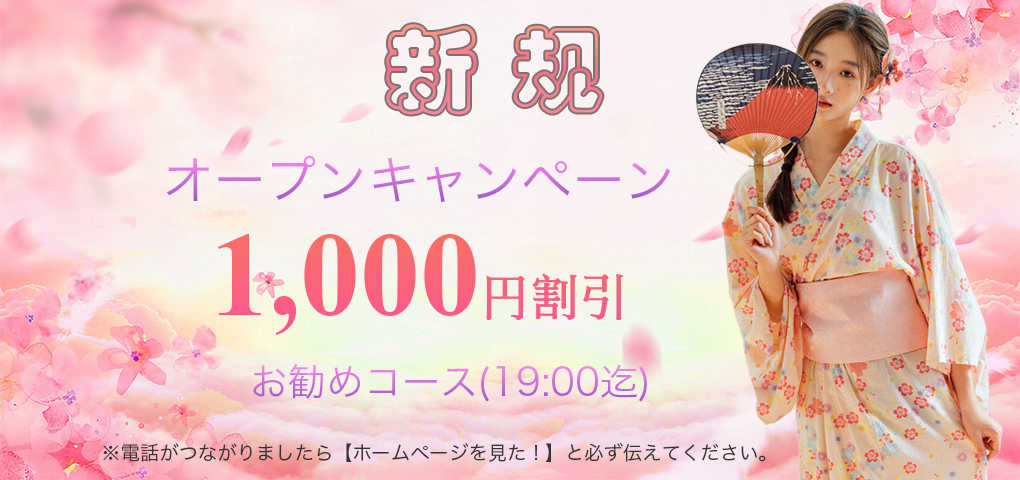
<style>
.page{position:relative;width:1020px;height:480px}
.page>*{position:absolute;margin:0}
.t1{font:94.2px "GJJCYJW--GB1-0";color:#f7808b}
.t2{font:51.2px "HiraKakuPro-W3"}
.t3{font:120px "TimesNewRomanPS-BoldMT";color:#fa637b}
.t4{font:50px "SimSong-Bold";color:#fa637b}
.t5{font:37.9px "HiraKakuPro-W3"}
.t6{font:19.3px "HiraKakuPro-W3";color:#343434}
</style>
<div class="page">
<p class="t1" style="left:386px;top:24px;width:217px;height:91px">新 规規</p>
<p class="t2" style="left:166px;top:155px;width:505px;height:47px">オープンキャンペーン</p>
<p class="t3" style="left:217px;top:234px;width:406px;height:101px">1,000<span class="t4">円割引</span></p>
<p class="t5" style="left:253px;top:364px;width:394px;height:38px">お勧めコース(19:00迄)</p>
<p class="t6" style="left:103px;top:443px;width:663px;height:19px">※電話がつながりましたら【ホームページを見た！】と必ず伝えてください。</p>
</div>
